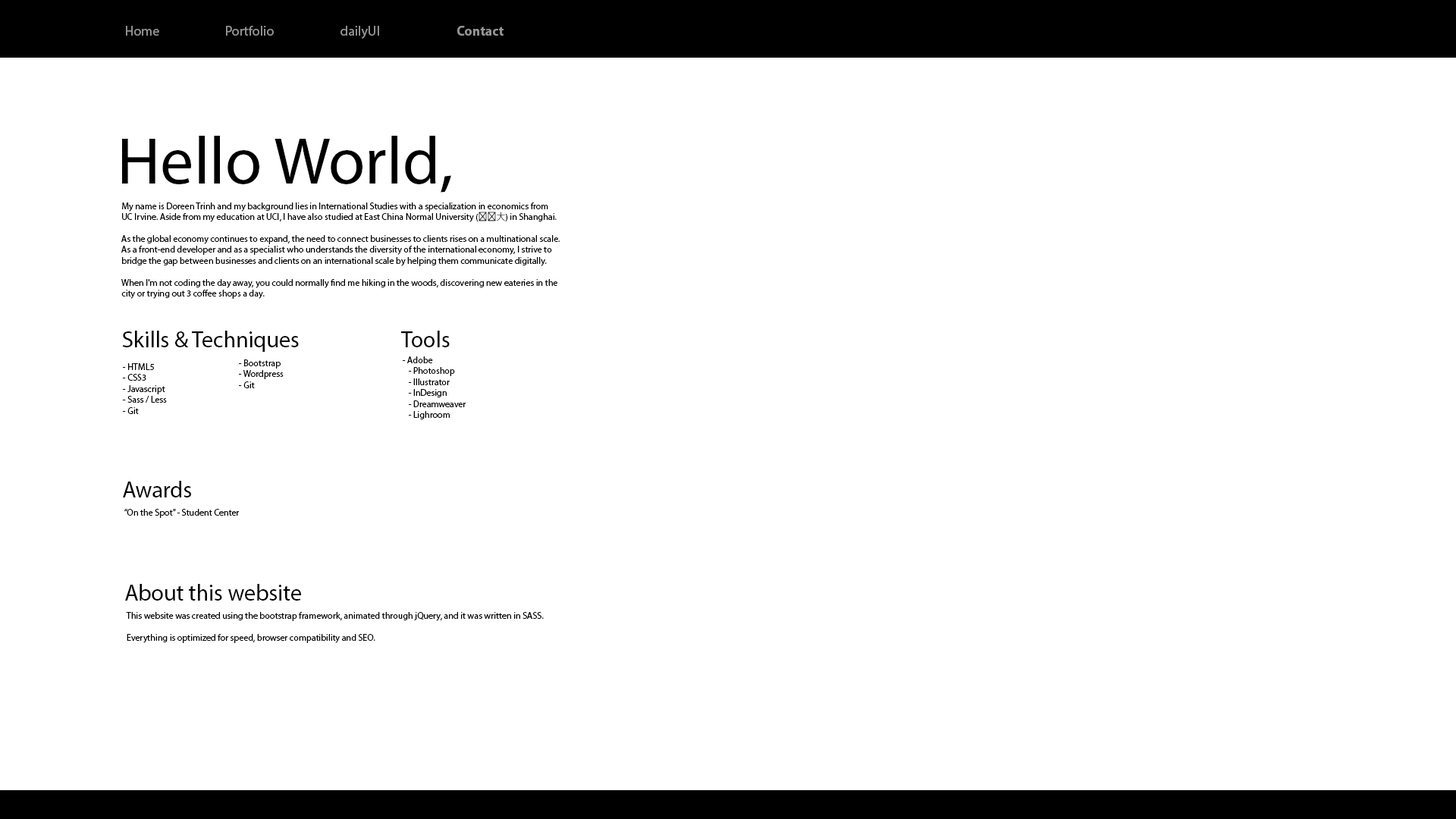
<style>
.page{position:relative;width:1456px;height:819px;background:#ffffff}
.page>*{position:absolute;margin:0}
.t1{font:13.6px "MyriadPro-Regular";color:#959595}
.t2{font:13.6px "MyriadPro-Bold";color:#959595}
.t3{font:66.8px "MyriadPro-Regular";color:#000000}
.t4{font:9.1px "MyriadPro-Regular";color:#000000}
.t5{font:9.1px "YuGothic-Light";color:#000000}
.t6{font:22.7px "MyriadPro-Regular";color:#000000}
</style>
<div class="page">
<p class="t1" style="left:126px;top:26px;width:33px;height:10px">Home</p>
<p class="t1" style="left:226px;top:26px;width:48px;height:10px">Portfolio</p>
<p class="t1" style="left:340px;top:26px;width:39px;height:13px">dailyUI</p>
<p class="t2" style="left:457px;top:26px;width:47px;height:10px">Contact</p>
<p class="t3" style="left:122px;top:136px;width:329px;height:57px">Hello World,</p>
<p class="t4" style="left:121px;top:202px;width:439px;height:97px">My name is Doreen Trinh and my background lies in International Studies with a specialization in economics from<br>UC Irvine. Aside from my education at UCI, I have also studied at East China Normal University (<span class="t5">华师大</span>) in Shanghai.<br><br>As the global economy continues to expand, the need to connect businesses to clients rises on a multinational scale.<br>As a front-end developer and as a specialist who understands the diversity of the international economy, I strive to<br>bridge the gap between businesses and clients on an international scale by helping them communicate digitally.<br><br>When I'm not coding the day away, you could normally find me hiking in the woods, discovering new eateries in the<br>city or trying out 3 coffee shops a day.</p>
<p class="t6" style="left:122px;top:331px;width:177px;height:21px">Skills &amp; Techniques</p>
<p class="t6" style="left:401px;top:331px;width:49px;height:16px">Tools</p>
<p class="t4" style="left:123px;top:363px;width:44px;height:51px">- HTML5<br>- CSS3<br>- Javascript<br>- Sass / Less<br>- Git</p>
<p class="t4" style="left:239px;top:359px;width:45px;height:29px">- Bootstrap<br>- Wordpress<br>- Git</p>
<p class="t4" style="left:403px;top:356px;width:63px;height:63px">- Adobe<br>   - Photoshop<br>   - Illustrator<br>   - InDesign<br>   - Dreamweaver<br>   - Lighroom</p>
<p class="t6" style="left:123px;top:481px;width:68px;height:16px">Awards</p>
<p class="t4" style="left:124px;top:509px;width:116px;height:9px">“On the Spot” - Student Center</p>
<p class="t6" style="left:125px;top:584px;width:176px;height:17px">About this website</p>
<p class="t4" style="left:126px;top:612px;width:418px;height:31px">This website was created using the bootstrap framework, animated through jQuery, and it was written in SASS.<br><br>Everything is optimized for speed, browser compatibility and SEO.</p>
</div>
